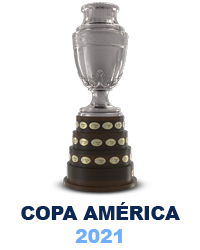
<style>
.page{position:relative;width:200px;height:250px;background:#ffffff}
.page>*{position:absolute;margin:0}
.t1{font:18.7px "Arial-Black";color:#0b2752}
.t2{font:18.7px "Arial-Black";color:#70aeff}
</style>
<div class="page">
<p class="t1" style="left:21px;top:202px;width:159px;height:41px;text-align:center">COPA AMÉRICA<br><span class="t2">2021</span></p>
</div>
